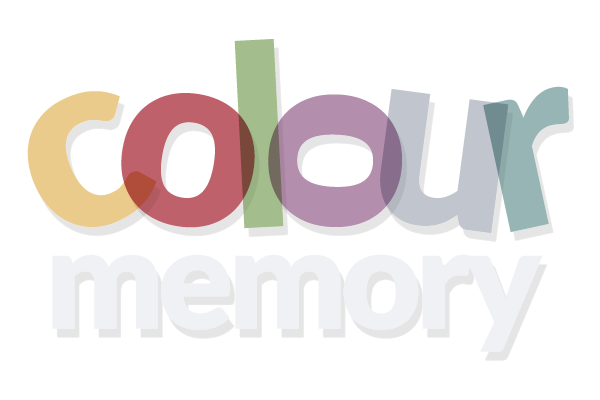
<style>
.page{position:relative;width:600px;height:400px;background:#ffffff}
.page>*{position:absolute;margin:0}
.t1{font:250px "Lato-Black";color:#a3be8c}
.t2{font:250px "Lato-Black";color:#c0c5ce}
.t3{font:250px "Lato-Black";color:#96b5b4}
.t4{font:250px "Lato-Black";color:#ebcb8b}
.t5{font:250px "Lato-Black";color:#bf616a}
.t6{font:250px "Lato-Black";color:#b48ead}
.t7{font:140px "Lato-Black";letter-spacing:-0.05em;color:#eff1f5}
</style>
<div class="page">
<p class="t1" style="left:234px;top:39px;width:50px;height:190px;rotate:-3deg">l</p>
<p class="t2" style="left:380px;top:89px;width:129px;height:144px;rotate:8deg">u</p>
<p class="t3" style="left:483px;top:86px;width:86px;height:146px;rotate:-12deg">r</p>
<p class="t4" style="left:27px;top:91px;width:130px;height:136px;rotate:-23deg">c</p>
<p class="t5" style="left:121px;top:93px;width:134px;height:135px;rotate:9deg">o</p>
<p class="t6" style="left:268px;top:94px;width:134px;height:133px;rotate:-88deg">o</p>
<p class="t7" style="left:52px;top:254px;width:491px;height:98px">memory</p>
</div>
